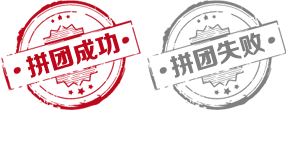
<style>
.page{position:relative;width:286px;height:144px;background:#ffffff}
.page>*{position:absolute;margin:0}
.t1{font:24px "FZZDHJW--GB1-0";color:#bd081c}
.t2{font:24px "FZZDHJW--GB1-0";color:#7f7f7f}
</style>
<div class="page">
<p class="t1" style="left:26px;top:32px;width:94px;height:46px;rotate:-16deg">拼团成功</p>
<p class="t2" style="left:170px;top:32px;width:95px;height:46px;rotate:-16deg">拼团失败</p>
</div>
